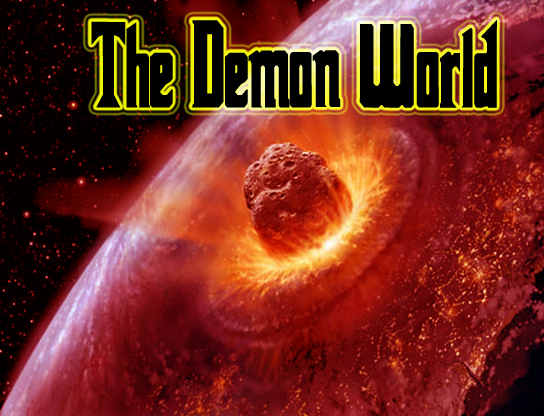
<style>
.page{position:relative;width:544px;height:416px}
.page>*{position:absolute;margin:0}
.t1{font:121.1px "Godfather";color:#000000;scale:0.82 1}
</style>
<div class="page">
<p class="t1" style="left:91px;top:20px;width:406px;height:88px">The Demon World</p>
</div>
